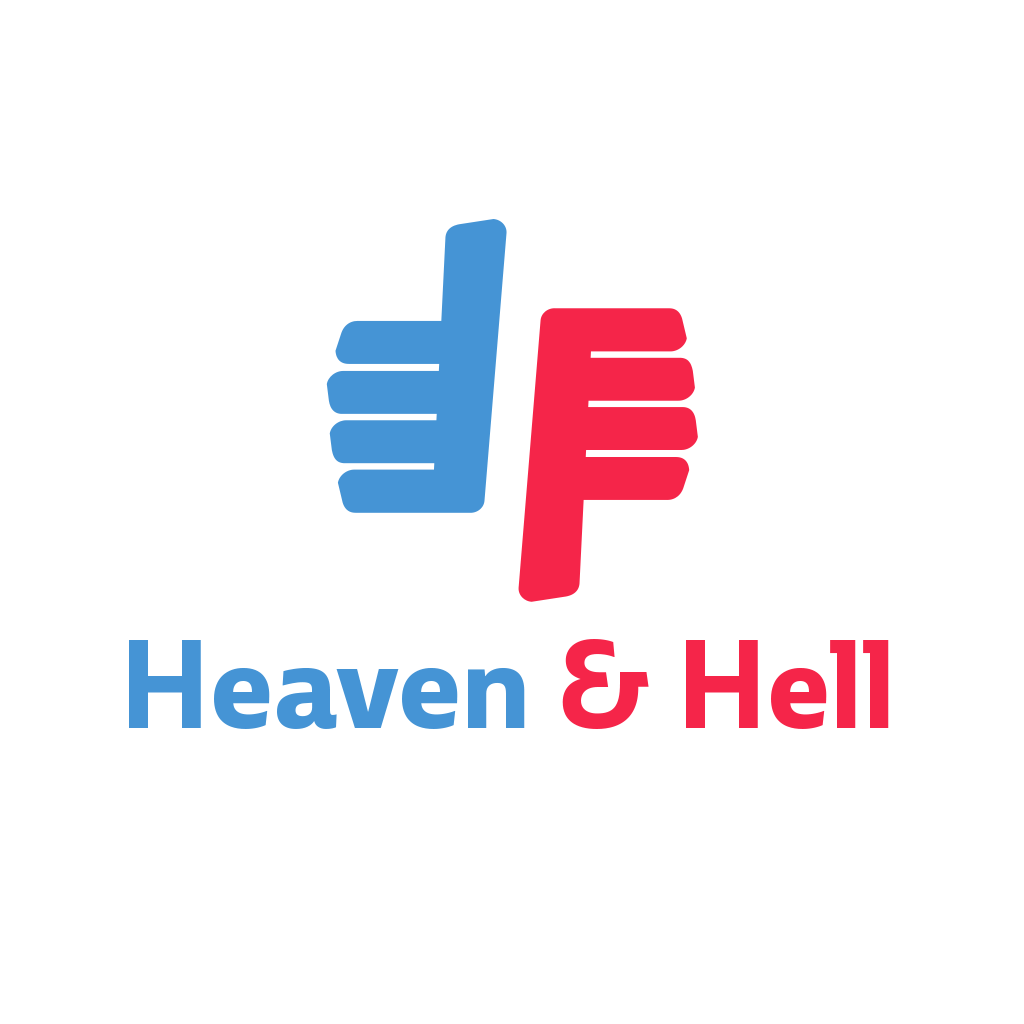
<style>
.page{position:relative;width:1024px;height:1024px;background:#ffffff}
.page>*{position:absolute;margin:0}
.t1{font:122.2px "Ebony-Bold";color:#4594d5}
.t2{font:122.2px "Ebony-Bold";color:#f52549}
</style>
<div class="page">
<p class="t1" style="left:129px;top:639px;width:760px;height:90px">Heaven <span class="t2">&amp; Hell</span></p>
</div>
